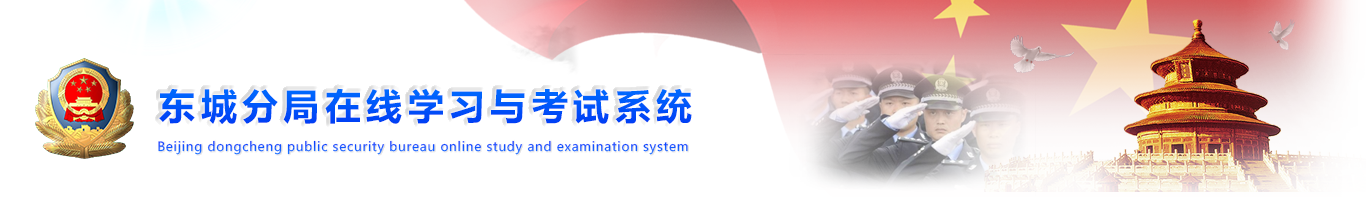
<style>
.page{position:relative;width:1366px;height:200px;background:#ffffff}
.page>*{position:absolute;margin:0}
.t1{font:36px "MicrosoftYaHei-Bold";letter-spacing:0.15em;color:#0042ff}
.t2{font:12.5px "MicrosoftYaHei";letter-spacing:0.06em;color:#1059ff}
</style>
<div class="page">
<p class="t1" style="left:159px;top:88px;width:533px;height:36px">东城分局在线学习与考试系统</p>
<p class="t2" style="left:158px;top:140px;width:530px;height:15px">Beijing dongcheng public security bureau online study and examination system</p>
</div>
